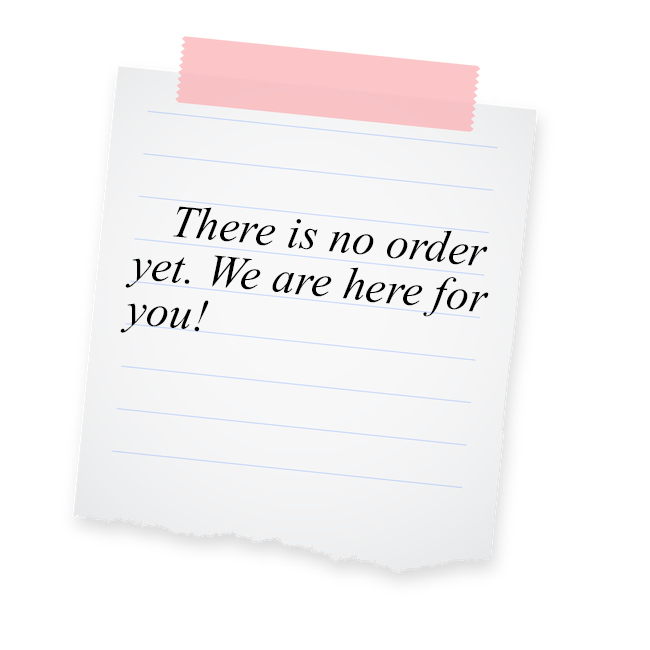
<style>
.page{position:relative;width:650px;height:650px;background:#ffffff}
.page>*{position:absolute;margin:0}
.t1{font:45.8px/45.8px "TimesNewRomanPS-ItalicMT";color:#000000}
</style>
<div class="page">
<p class="t1" style="left:120px;top:206px;width:369px;height:127px;rotate:6deg">There is no order <br>yet. We are here for<br>you!</p>
</div>
